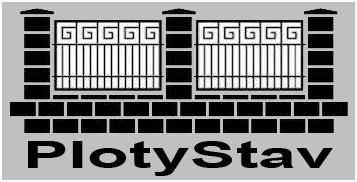
<style>
.page{position:relative;width:357px;height:182px;background:#c0c0c0}
.page>*{position:absolute;margin:0}
.t1{font:38.2px "Arial-BoldMT";color:#010101;scale:1.79 1}
</style>
<div class="page">
<p class="t1" style="left:28px;top:141px;width:305px;height:35px">PlotyStav</p>
</div>
